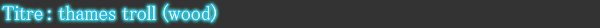
<style>
.page{position:relative;width:600px;height:28px;background:#333333}
.page>*{position:absolute;margin:0}
.t1{font:20px "MS-PMincho";color:#ffffff}
</style>
<div class="page">
<p class="t1" style="left:2px;top:4px;width:214px;height:18px">Titre : thames troll (wood)</p>
</div>
